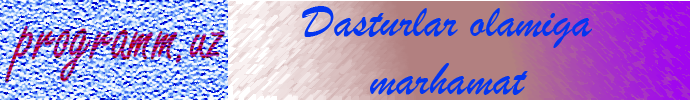
<style>
.page{position:relative;width:690px;height:100px}
.page>*{position:absolute;margin:0}
.t1{font:48px "BrushScriptMT";color:#0335f0}
</style>
<div class="page">
<p class="t1" style="left:302px;top:6px;width:290px;height:89px;text-align:center">Dasturlar olamiga<br>marhamat</p>
</div>
